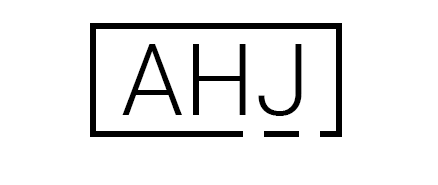
<style>
.page{position:relative;width:438px;height:185px;background:#ffffff}
.page>*{position:absolute;margin:0}
.t1{font:100px "Roboto-Light";color:#000000}
</style>
<div class="page">
<p class="t1" style="left:122px;top:44px;width:180px;height:72px">AHJ</p>
</div>
